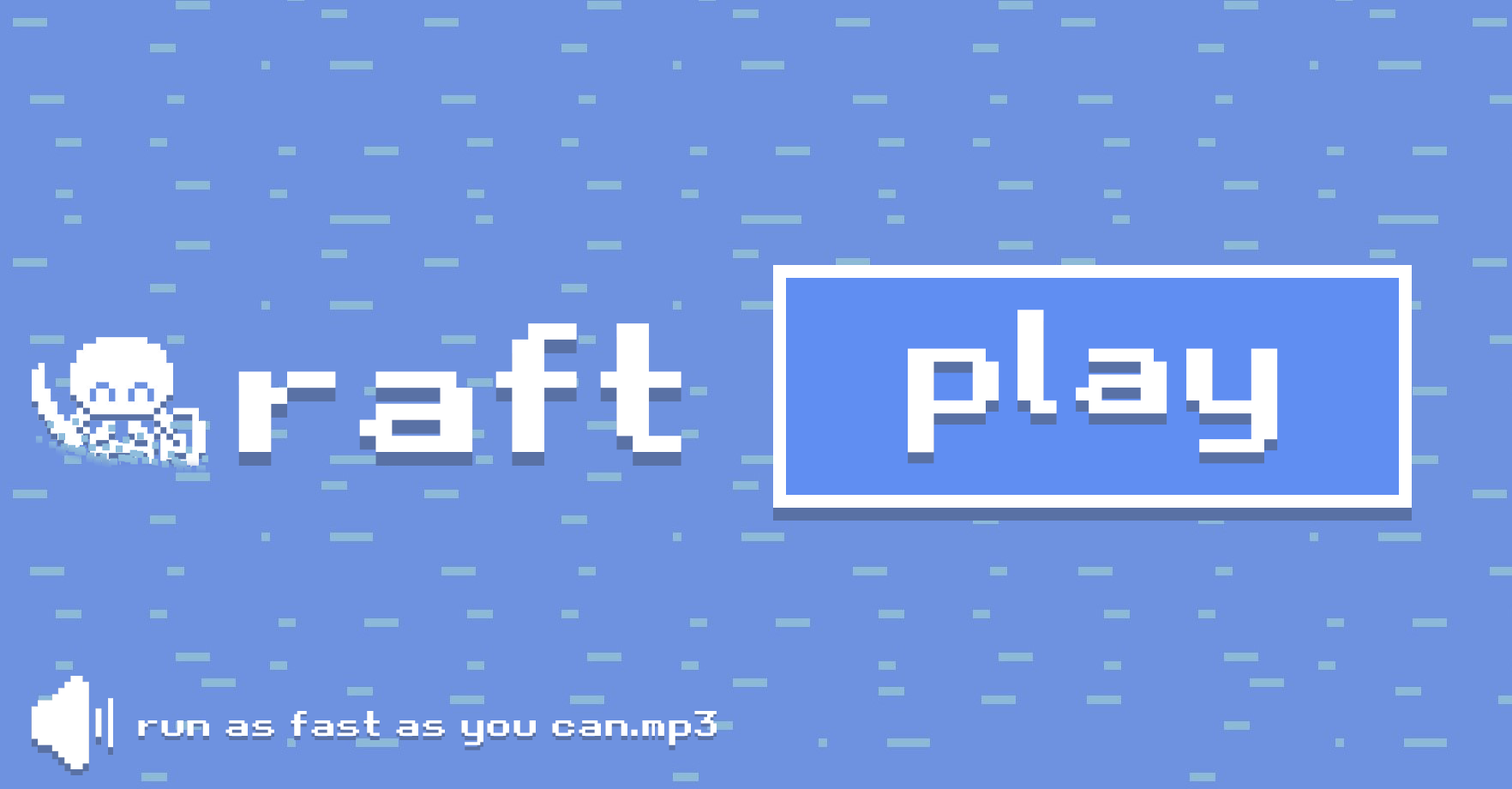
<style>
.page{position:relative;width:1512px;height:789px;background:#6e92e0}
.page>*{position:absolute;margin:0}
.t1{font:142.3px "RetroGaming";color:#ffffff}
.t2{font:176.6px "RetroGaming";color:#ffffff}
.t3{font:142.3px "RetroGaming"}
.t4{font:176.6px "RetroGaming"}
.t5{font:34px "RetroGaming";color:#ffffff}
</style>
<div class="page">
<p class="t1" style="left:908px;top:309px;width:370px;height:144px">play</p>
<p class="t2" style="left:238px;top:323px;width:443px;height:129px">raft</p>
<p class="t3" style="left:908px;top:321px;width:370px;height:143px">play</p>
<p class="t4" style="left:238px;top:337px;width:443px;height:128px">raft</p>
<p class="t5" style="left:138px;top:711px;width:579px;height:34px">run as fast as you can.mp3</p>
</div>
